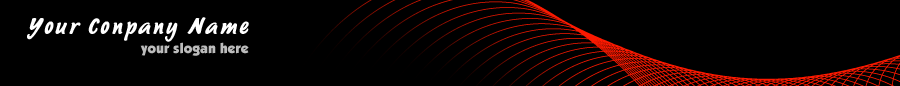
<style>
.page{position:relative;width:900px;height:86px;background:#000000}
.page>*{position:absolute;margin:0}
.t1{font:24px "SayerScriptMN";letter-spacing:0.05em;color:#ffffff}
.t2{font:14px "KabelITCbyBT-Ultra";color:#bcbcbc}
</style>
<div class="page">
<p class="t1" style="left:27px;top:17px;width:222px;height:25px">Your Conpany Name</p>
<p class="t2" style="left:140px;top:42px;width:109px;height:14px">your slogan here</p>
</div>
